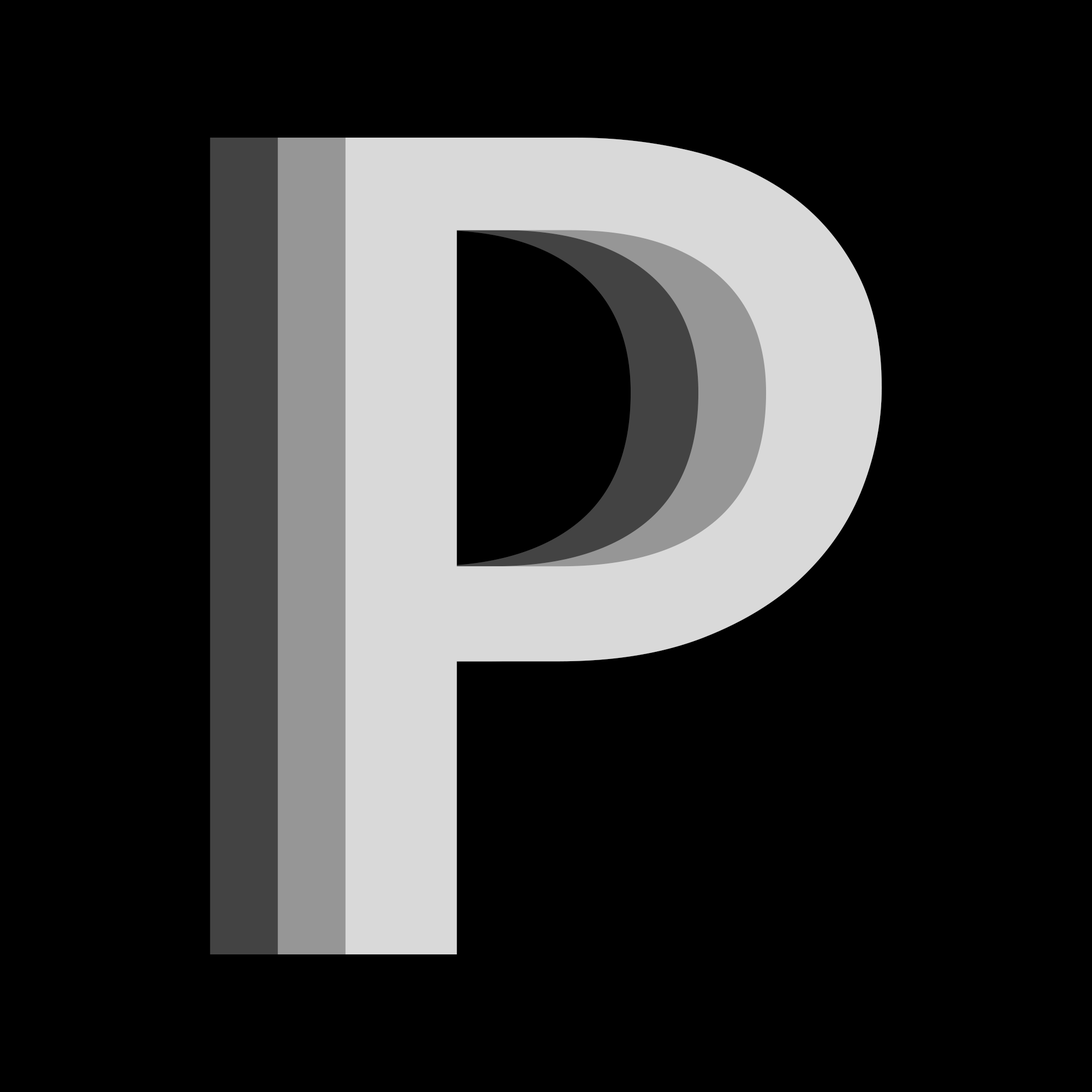
<style>
.page{position:relative;width:1092px;height:1092px;background:#000000}
.page>*{position:absolute;margin:0}
.t1{font:1280px "Consolas"}
.t2{font:1280px "Consolas";color:#d9d9d9}
</style>
<div class="page">
<p class="t1" style="left:277px;top:138px;width:537px;height:816px">P</p>
<p class="t2" style="left:345px;top:138px;width:537px;height:816px">P</p>
</div>
